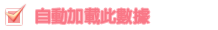
<style>
.page{position:relative;width:218px;height:30px;background:#ffffff}
.page>*{position:absolute;margin:0}
.t1{font:16px "AdobeFanHeitiStd-Bold";color:#f97887;font-weight:bold}
</style>
<div class="page">
<p class="t1" style="left:36px;top:8px;width:114px;height:17px">自動加載此數據</p>
</div>
